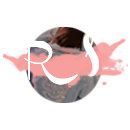
<style>
.page{position:relative;width:130px;height:130px;background:#ffffff}
.page>*{position:absolute;margin:0}
.t1{font:22.7px/20.2px "Channel";letter-spacing:0.075em;color:#ffffff;scale:0.87 1}
.t2{font:53.9px "Channel";letter-spacing:0.075em;color:#ffffff;scale:0.65 1}
</style>
<div class="page">
<p class="t1" style="left:16px;top:40px;width:62px;height:45px">R</p>
<p class="t1" style="left:16px;top:40px;width:62px;height:45px">R</p>
<p class="t2" style="left:83px;top:33px;width:16px;height:44px">s</p>
</div>
